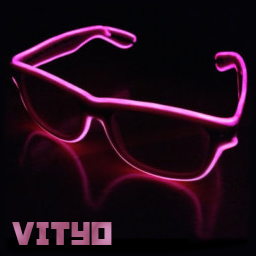
<style>
.page{position:relative;width:256px;height:256px}
.page>*{position:absolute;margin:0}
.t1{font:30px "HungerGames";color:#ab5f83}
</style>
<div class="page">
<p class="t1" style="left:12px;top:222px;width:100px;height:23px">VITYO</p>
</div>
